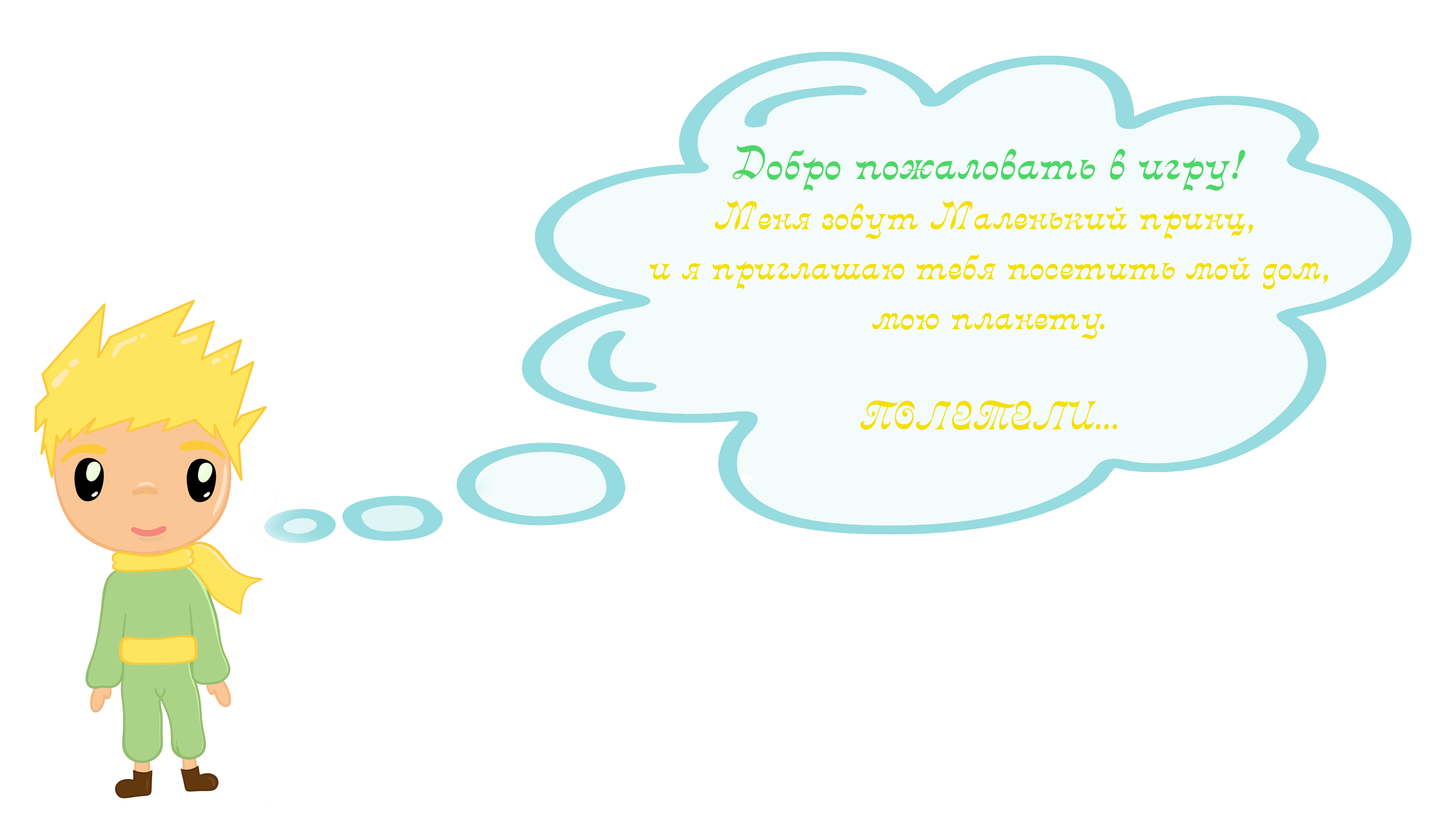
<style>
.page{position:relative;width:1456px;height:819px;background:#ffffff}
.page>*{position:absolute;margin:0}
.t1{font:41.7px "DecadanceCursiv";color:#f4e005}
.t2{font:49.3px "DecadanceCursiv";color:#4cd766}
</style>
<div class="page">
<p class="t1" style="left:650px;top:145px;width:678px;height:285px;text-align:center"><span class="t2">Добро пожаловать в игру!<br></span>Меня зовут Маленький принц, <br>и я приглашаю тебя посетить мой дом,<br>мою планету.<br><br>ПОЛЕТЕЛИ...</p>
</div>
